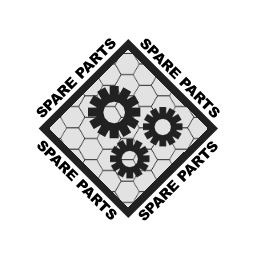
<style>
.page{position:relative;width:256px;height:256px;background:#ffffff}
.page>*{position:absolute;margin:0}
.t1{font:14px "Arial-Black";color:#000000}
</style>
<div class="page">
<p class="t1" style="left:36px;top:38px;width:80px;height:80px;rotate:-45deg">SPARE PARTS</p>
<p class="t1" style="left:140px;top:38px;width:80px;height:80px;rotate:45deg">SPARE PARTS</p>
<p class="t1" style="left:37px;top:140px;width:80px;height:80px;rotate:45deg">SPARE PARTS</p>
<p class="t1" style="left:138px;top:141px;width:80px;height:80px;rotate:-45deg">SPARE PARTS</p>
</div>
